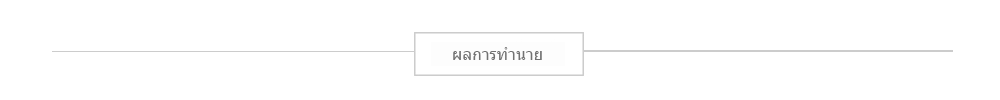
<style>
.page{position:relative;width:1000px;height:100px;background:#ffffff}
.page>*{position:absolute;margin:0}
.t1{font:16.7px "Tahoma";color:#727272;scale:0.97 1}
</style>
<div class="page">
<p class="t1" style="left:453px;top:47px;width:89px;height:13px">ผลการทำนาย</p>
</div>
